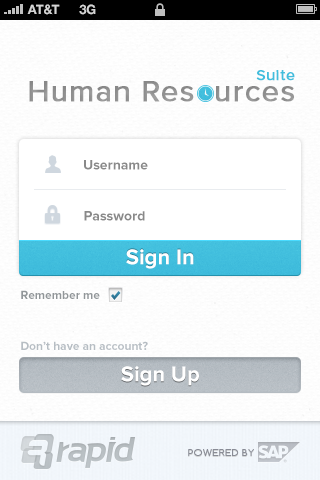
<style>
.page{position:relative;width:320px;height:480px;background:#ffffff}
.page>*{position:absolute;margin:0}
.t1{font:13px "HelveticaNeue-Bold";color:#d4d4d4;text-transform:uppercase}
.t2{font:15px "ProximaNova-Regular";letter-spacing:0.036em;color:#41bedd;font-weight:bold}
.t3{font:30px "ProximaNova-Regular";letter-spacing:0.023em;color:#919191;font-weight:bold}
.t4{font:14px "ProximaNova-Bold";color:#898989}
.t5{font:22px "ProximaNova-Bold";color:#ffffff}
.t6{font:12px "ProximaNova-Bold";color:#919699}
.t7{font:12px "ProximaNova-Bold";color:#b6bdc3}
.t8{font:9px "Comfortaa";letter-spacing:0.036em;color:#898c96;text-transform:uppercase;scale:1.11 1}
</style>
<div class="page">
<p class="t1" style="left:27px;top:4px;width:33px;height:11px">AT&amp;t</p>
<p class="t1" style="left:79px;top:4px;width:17px;height:11px">3G</p>
<p class="t2" style="left:256px;top:70px;width:39px;height:11px">Suite</p>
<p class="t3" style="left:29px;top:81px;width:265px;height:21px">Human Res  urces</p>
<p class="t4" style="left:84px;top:160px;width:64px;height:10px">Username</p>
<p class="t4" style="left:84px;top:211px;width:61px;height:10px">Password</p>
<p class="t5" style="left:126px;top:249px;width:68px;height:20px">Sign In</p>
<p class="t6" style="left:21px;top:290px;width:79px;height:9px">Remember me</p>
<p class="t7" style="left:21px;top:341px;width:127px;height:9px">Don’t have an account?</p>
<p class="t5" style="left:121px;top:366px;width:78px;height:20px">Sign Up</p>
<p class="t5" style="left:121px;top:366px;width:78px;height:20px">Sign Up</p>
<p class="t8" style="left:188px;top:449px;width:66px;height:7px">POWERED BY</p>
</div>
